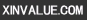
<style>
.page{position:relative;width:87px;height:20px;background:#333333}
.page>*{position:absolute;margin:0}
.t1{font:13.3px "SimHei";letter-spacing:0.06em;color:#fbf8fb;scale:1.17 1}
</style>
<div class="page">
<p class="t1" style="left:2px;top:5px;width:81px;height:10px">XINVALUE.COM</p>
</div>
